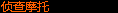
<style>
.page{position:relative;width:118px;height:13px;background:#000000}
.page>*{position:absolute;margin:0}
.t1{font:12px "MicrosoftYaHei";color:#ff5f00}
</style>
<div class="page">
<p class="t1" style="left:1px;top:1px;width:48px;height:11px">侦查摩托</p>
</div>
